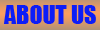
<style>
.page{position:relative;width:100px;height:30px;background:#0d1df8}
.page>*{position:absolute;margin:0}
.t1{font:24px "Impact";color:#0d1df8}
</style>
<div class="page">
<p class="t1" style="left:4px;top:5px;width:92px;height:19px">ABOUT US</p>
</div>
